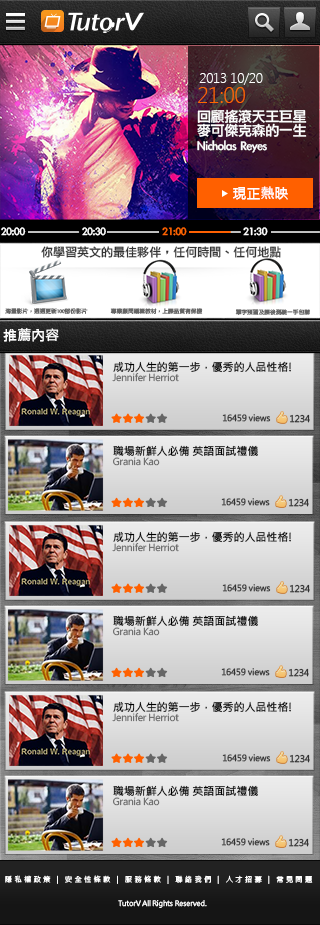
<style>
.page{position:relative;width:320px;height:925px}
.page>*{position:absolute;margin:0}
.t1{font:14px "SegoeUI-Light";letter-spacing:-0.025em;color:#ffffff}
.t2{font:22.3px "SegoeUI-Light";letter-spacing:-0.025em;color:#ff6600}
.t3{font:14px/14.6px "LiGothicMed";letter-spacing:-0.025em;color:#ffffff}
.t4{font:14px "MicrosoftJhengHeiRegular";letter-spacing:-0.025em;color:#ffffff;font-weight:bold}
.t5{font:12px "LiGothicMed";letter-spacing:-0.025em;color:#ffffff}
.t6{font:12px "LiGothicMed";letter-spacing:-0.025em;color:#ff6600}
.t7{font:12px "LiGothicMed";color:#333333}
.t8{font:5.9px "LiGothicMed";letter-spacing:-0.025em;color:#666666}
.t9{font:11px/11.1px "MicrosoftJhengHeiRegular";letter-spacing:-0.025em;color:#000000;font-weight:bold}
.t10{font:9.6px/11.1px "MicrosoftJhengHeiRegular";letter-spacing:-0.025em;color:#000000}
.t11{font:8.5px "MicrosoftJhengHeiRegular";letter-spacing:-0.025em;color:#333333;font-weight:bold}
.t12{font:8.9px "MicrosoftJhengHeiRegular";letter-spacing:-0.025em;color:#333333;font-weight:bold}
.t13{font:7.4px "MicrosoftJhengHeiRegular";letter-spacing:0.3em;color:#ffffff}
.t14{font:7.4px "MicrosoftJhengHeiRegular";letter-spacing:-0.025em;color:#ffffff}
</style>
<div class="page">
<p class="t1" style="left:199px;top:73px;width:64px;height:12px">2013 10/20</p>
<p class="t2" style="left:198px;top:87px;width:47px;height:16px">21:00</p>
<p class="t3" style="left:197px;top:109px;width:110px;height:44px">回顧搖滾天王巨星 <br>麥可傑克森的一生<br>Nicholas Reyes</p>
<p class="t4" style="left:233px;top:186px;width:55px;height:14px">現正熱映</p>
<p class="t5" style="left:1px;top:227px;width:25px;height:9px">20:00</p>
<p class="t5" style="left:82px;top:227px;width:24px;height:9px">20:30</p>
<p class="t6" style="left:162px;top:227px;width:25px;height:9px">21:00</p>
<p class="t5" style="left:243px;top:227px;width:25px;height:9px">21:30</p>
<p class="t7" style="left:41px;top:246px;width:240px;height:12px">你學習英文的最佳夥伴，任何時間、任何地點</p>
<p class="t8" style="left:5px;top:308px;width:83px;height:6px">海量影片，週週更新100部份影片</p>
<p class="t8" style="left:110px;top:308px;width:93px;height:6px">專業顧問編輯教材，上課品質有保證</p>
<p class="t8" style="left:235px;top:309px;width:75px;height:6px">單字預習及課後測驗一手包辦</p>
<p class="t4" style="left:3px;top:328px;width:56px;height:14px">推薦內容</p>
<p class="t9" style="left:112px;top:361px;width:179px;height:21px">成功人生的第一步，優秀的人品性格!<br><span class="t10">Jennifer Herriot</span></p>
<p class="t11" style="left:222px;top:414px;width:49px;height:8px">16459 views</p>
<p class="t12" style="left:290px;top:414px;width:20px;height:9px">1234</p>
<p class="t9" style="left:113px;top:445px;width:145px;height:21px">職場新鮮人必備 英語面試禮儀<br><span class="t10">Grania Kao</span></p>
<p class="t11" style="left:221px;top:498px;width:49px;height:8px">16459 views</p>
<p class="t12" style="left:289px;top:498px;width:20px;height:9px">1234</p>
<p class="t9" style="left:112px;top:531px;width:179px;height:21px">成功人生的第一步，優秀的人品性格!<br><span class="t10">Jennifer Herriot</span></p>
<p class="t11" style="left:222px;top:584px;width:49px;height:8px">16459 views</p>
<p class="t12" style="left:290px;top:584px;width:20px;height:9px">1234</p>
<p class="t9" style="left:113px;top:615px;width:145px;height:21px">職場新鮮人必備 英語面試禮儀<br><span class="t10">Grania Kao</span></p>
<p class="t11" style="left:221px;top:668px;width:49px;height:8px">16459 views</p>
<p class="t12" style="left:289px;top:668px;width:20px;height:9px">1234</p>
<p class="t9" style="left:112px;top:701px;width:179px;height:21px">成功人生的第一步，優秀的人品性格!<br><span class="t10">Jennifer Herriot</span></p>
<p class="t11" style="left:222px;top:754px;width:49px;height:8px">16459 views</p>
<p class="t12" style="left:290px;top:754px;width:20px;height:9px">1234</p>
<p class="t9" style="left:113px;top:785px;width:145px;height:21px">職場新鮮人必備 英語面試禮儀<br><span class="t10">Grania Kao</span></p>
<p class="t11" style="left:221px;top:838px;width:49px;height:8px">16459 views</p>
<p class="t12" style="left:289px;top:838px;width:20px;height:9px">1234</p>
<p class="t13" style="left:5px;top:875px;width:308px;height:9px">隱私權政策 | 安全性條款 | 服務條款 | 聯絡我們 | 人才招募 | 常見問題</p>
<p class="t14" style="left:118px;top:900px;width:89px;height:8px">TutorV All Rights Reserved.</p>
</div>
